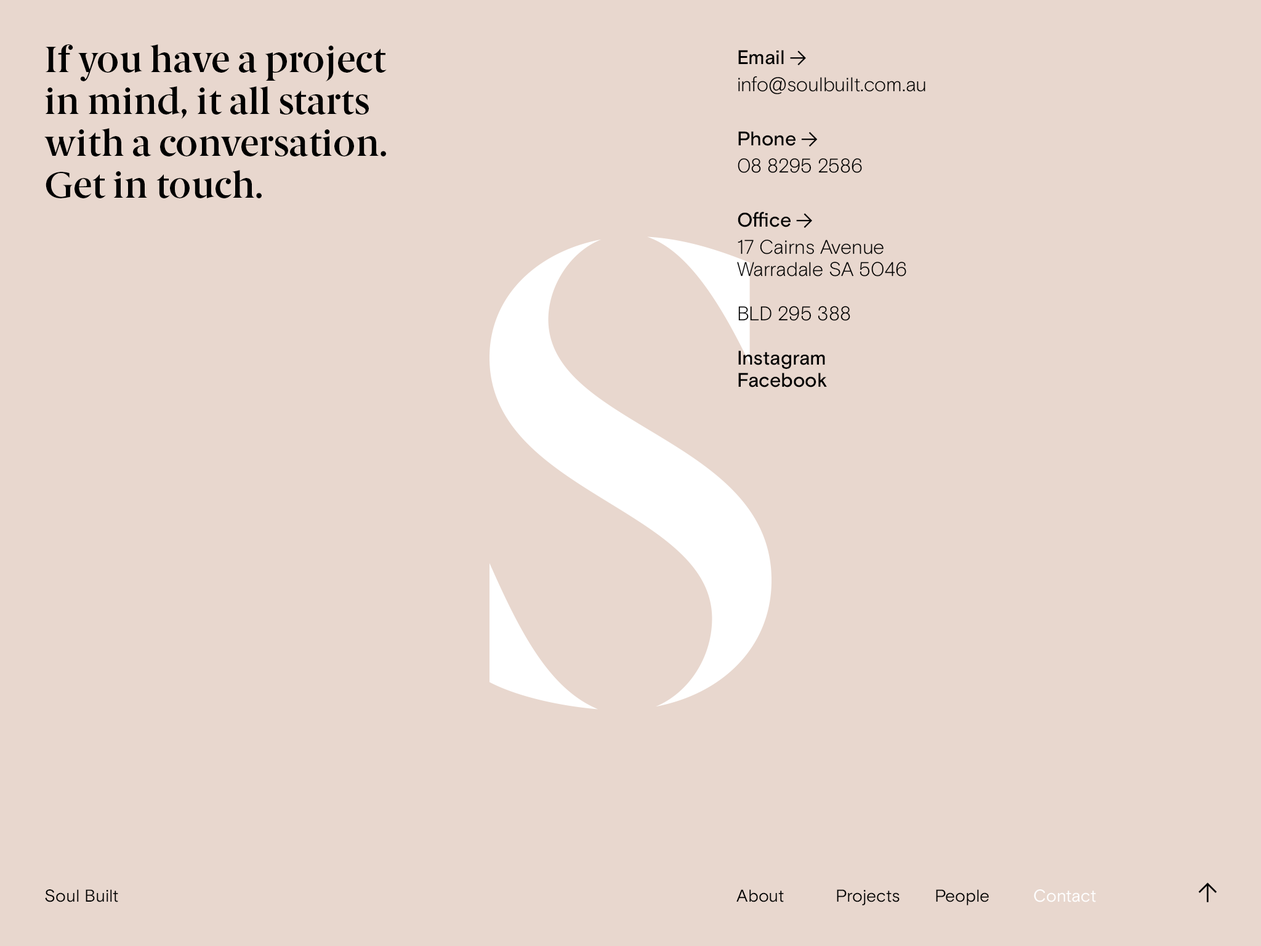
<style>
.page{position:relative;width:1261px;height:946px;background:#e8d7ce}
.page>*{position:absolute;margin:0}
.t1{font:36.9px "BerlingskeSerif-DemiBold";color:#000000}
.t2{font:36.9px "BerlingskeSerif-DemiBold";letter-spacing:-0.039em;color:#000000}
.t3{font:36.9px "BerlingskeSerif-DemiBold";letter-spacing:-0.03em;color:#000000}
.t4{font:36.9px "BerlingskeSerif-DemiBold";letter-spacing:-0.049em;color:#000000}
.t5{font:36.9px "BerlingskeSerif-DemiBold";letter-spacing:-0.02em;color:#000000}
.t6{font:19.7px "BasisGrotesquePro-Medium";color:#000000}
.t7{font:19.7px "BasisGrotesquePro-Medium";letter-spacing:-0.022em;color:#000000}
.t8{font:19.7px "BasisGrotesquePro-Medium";letter-spacing:-0.01em;color:#000000}
.t9{font:19.7px "BasisGrotesquePro-Light";color:#000000}
.t10{font:19.7px "BasisGrotesquePro-Light";letter-spacing:-0.027em;color:#000000}
.t11{font:19.7px "BasisGrotesquePro-Light";letter-spacing:-0.022em;color:#000000}
.t12{font:19.7px "BasisGrotesquePro-Light";letter-spacing:-0.006em;color:#000000}
.t13{font:19.7px "BasisGrotesquePro-Light";letter-spacing:-0.007em;color:#000000}
.t14{font:19.7px "BasisGrotesquePro-Light";letter-spacing:-0.009em;color:#000000}
.t15{font:19.7px "BasisGrotesquePro-Light";letter-spacing:-0.01em;color:#000000}
.t16{font:36.9px "BerlingskeSerif-DemiBold";letter-spacing:-0.019em;color:#000000}
.t17{font:36.9px "BerlingskeSerif-DemiBold";letter-spacing:-0.05em;color:#000000}
.t18{font:36.9px "BerlingskeSerif-DemiBold";letter-spacing:-0.009em;color:#000000}
.t19{font:19.7px "BasisGrotesquePro-Medium";letter-spacing:-0.017em;color:#000000}
.t20{font:19.7px "BasisGrotesquePro-Medium";letter-spacing:-0.004em;color:#000000}
.t21{font:19.7px "BasisGrotesquePro-Medium";letter-spacing:-0.005em;color:#000000}
.t22{font:19.7px "BasisGrotesquePro-Light";letter-spacing:-0.042em;color:#000000}
.t23{font:19.7px "BasisGrotesquePro-Light";letter-spacing:-0.024em;color:#000000}
.t24{font:19.7px "BasisGrotesquePro-Medium";letter-spacing:-0.006em;color:#000000}
.t25{font:19.7px "BasisGrotesquePro-Light";letter-spacing:-0.025em;color:#000000}
.t26{font:19.7px "BasisGrotesquePro-Light";letter-spacing:-0.05em;color:#000000}
.t27{font:19.7px "BasisGrotesquePro-Light";letter-spacing:-0.017em;color:#000000}
.t28{font:19.7px "BasisGrotesquePro-Light";letter-spacing:-0.013em;color:#000000}
.t29{font:19.7px "BasisGrotesquePro-Light";letter-spacing:-0.048em;color:#000000}
.t30{font:19.7px "BasisGrotesquePro-Light";letter-spacing:-0.011em;color:#000000}
.t31{font:19.7px "BasisGrotesquePro-Light";letter-spacing:-0.021em;color:#000000}
.t32{font:19.7px "BasisGrotesquePro-Light";letter-spacing:-0.008em;color:#000000}
.t33{font:19.7px "BasisGrotesquePro-Light";letter-spacing:-0.014em;color:#000000}
.t34{font:19.7px "BasisGrotesquePro-Light";letter-spacing:-0.015em;color:#000000}
.t35{font:19.7px "BasisGrotesquePro-Light";letter-spacing:-0.028em;color:#000000}
.t36{font:19.7px "BasisGrotesquePro-Medium";letter-spacing:-0.021em;color:#000000}
.t37{font:19.7px "BasisGrotesquePro-Medium";letter-spacing:-0.014em;color:#000000}
.t38{font:19.7px "BasisGrotesquePro-Medium";letter-spacing:-0.048em;color:#000000}
.t39{font:17.2px "BasisGrotesquePro";color:#000000}
.t40{font:17.2px "BasisGrotesquePro";letter-spacing:-0.007em;color:#000000}
.t41{font:17.2px "BasisGrotesquePro";letter-spacing:-0.002em;color:#000000}
.t42{font:17.2px "BasisGrotesquePro";letter-spacing:-0.025em;color:#000000}
.t43{font:17.2px "BasisGrotesquePro";letter-spacing:-0.023em;color:#000000}
.t44{font:17.2px "BasisGrotesquePro";letter-spacing:-0.009em;color:#000000}
.t45{font:17.2px "BasisGrotesquePro";letter-spacing:-0.003em;color:#000000}
.t46{font:17.2px "BasisGrotesquePro";letter-spacing:-0.008em;color:#000000}
.t47{font:17.2px "BasisGrotesquePro";letter-spacing:-0.057em;color:#000000}
.t48{font:17.2px "BasisGrotesquePro";letter-spacing:-0.019em;color:#ffffff}
.t49{font:17.2px "BasisGrotesquePro";color:#ffffff}
.t50{font:17.2px "BasisGrotesquePro";letter-spacing:-0.026em;color:#ffffff}
.t51{font:17.2px "BasisGrotesquePro";letter-spacing:-0.007em;color:#ffffff}
.t52{font:17.2px "BasisGrotesquePro";letter-spacing:-0.005em;color:#ffffff}
.t53{font:17.2px "BasisGrotesquePro";letter-spacing:-0.009em;color:#ffffff}
</style>
<div class="page">
<p class="t1" style="left:46px;top:44px;width:341px;height:37px">If <span class="t2">y</span>ou h<span class="t3">a</span><span class="t4">v</span>e a p<span class="t5">r</span>oject</p>
<p class="t6" style="left:738px;top:50px;width:46px;height:15px"><span class="t7">E</span><span class="t8">m</span>ail</p>
<p class="t9" style="left:738px;top:76px;width:187px;height:18px">i<span class="t10">n</span><span class="t11">f</span>o@<span class="t12">s</span><span class="t13">o</span>ul<span class="t13">b</span>uilt.<span class="t14">c</span>om.<span class="t15">a</span>u</p>
<p class="t1" style="left:45px;top:86px;width:324px;height:33px">in mind, it all <span class="t3">s</span>tarts</p>
<p class="t1" style="left:44px;top:128px;width:342px;height:28px"><span class="t16">w</span>ith a <span class="t5">c</span>o<span class="t2">n</span><span class="t17">v</span>e<span class="t18">r</span>sation.</p>
<p class="t19" style="left:738px;top:131px;width:57px;height:15px">P<span class="t20">h</span><span class="t6">o</span><span class="t21">n</span><span class="t6">e</span></p>
<p class="t9" style="left:738px;top:158px;width:124px;height:15px">08 8<span class="t22">2</span>95 <span class="t23">2</span>586</p>
<p class="t1" style="left:46px;top:170px;width:216px;height:28px">Get in touch.</p>
<p class="t6" style="left:738px;top:212px;width:53px;height:15px">O<span class="t20">ﬃ</span><span class="t24">c</span>e</p>
<p class="t9" style="left:738px;top:240px;width:146px;height:14px">17 <span class="t23">C</span>air<span class="t25">n</span>s <span class="t26">A</span><span class="t27">v</span>e<span class="t28">n</span>ue</p>
<p class="t9" style="left:737px;top:262px;width:169px;height:14px"><span class="t29">W</span><span class="t30">a</span>r<span class="t31">r</span><span class="t12">a</span><span class="t32">d</span><span class="t33">a</span>le SA 5<span class="t15">0</span>46</p>
<p class="t9" style="left:738px;top:306px;width:112px;height:15px"><span class="t34">B</span><span class="t35">L</span>D <span class="t22">2</span>95 388</p>
<p class="t6" style="left:738px;top:350px;width:87px;height:19px">I<span class="t7">n</span><span class="t8">s</span><span class="t24">t</span><span class="t21">a</span>g<span class="t36">r</span><span class="t37">a</span>m</p>
<p class="t6" style="left:738px;top:372px;width:89px;height:15px"><span class="t38">F</span><span class="t24">ac</span>ebook</p>
<p class="t39" style="left:45px;top:889px;width:73px;height:13px">S<span class="t40">o</span>ul Built</p>
<p class="t39" style="left:736px;top:889px;width:48px;height:13px">Ab<span class="t40">o</span><span class="t41">u</span>t</p>
<p class="t42" style="left:837px;top:889px;width:63px;height:16px">P<span class="t43">r</span><span class="t39">o</span><span class="t44">j</span><span class="t45">e</span><span class="t44">c</span><span class="t46">t</span><span class="t39">s</span></p>
<p class="t39" style="left:936px;top:889px;width:53px;height:16px"><span class="t47">P</span><span class="t45">e</span>ople</p>
<p class="t48" style="left:1034px;top:889px;width:62px;height:13px">C<span class="t49">o</span><span class="t50">n</span><span class="t51">t</span><span class="t52">a</span><span class="t53">c</span><span class="t49">t</span></p>
</div>
